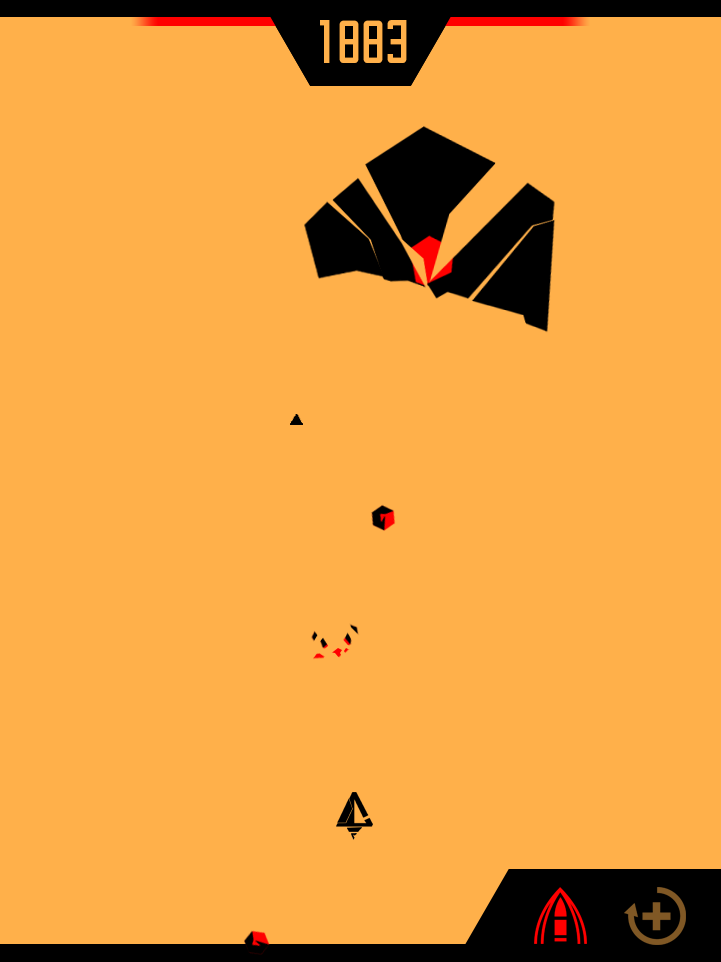
<style>
.page{position:relative;width:721px;height:962px;background:#ffb04a}
.page>*{position:absolute;margin:0}
.t1{font:53.2px "SAOUI-Regular";color:#ffb04a}
</style>
<div class="page">
<p class="t1" style="left:320px;top:20px;width:87px;height:43px">1335</p>
<p class="t1" style="left:320px;top:20px;width:86px;height:43px">1337</p>
<p class="t1" style="left:320px;top:20px;width:87px;height:43px">1522</p>
<p class="t1" style="left:320px;top:20px;width:87px;height:43px">1540</p>
<p class="t1" style="left:320px;top:20px;width:86px;height:43px">1777</p>
<p class="t1" style="left:320px;top:20px;width:87px;height:43px">1822</p>
<p class="t1" style="left:320px;top:20px;width:87px;height:43px">1883</p>
</div>
